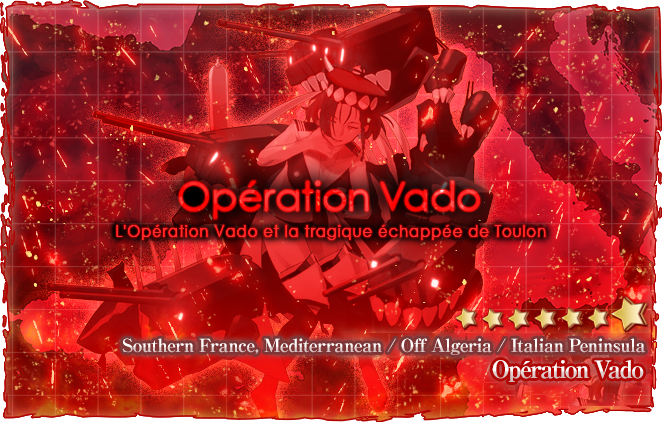
<style>
.page{position:relative;width:662px;height:422px}
.page>*{position:absolute;margin:0}
.t1{font:18px "RyuminPro-ExBold";letter-spacing:-0.04em}
.t2{font:24px "RyuminPro-ExBold";letter-spacing:-0.08em}
</style>
<div class="page">
<p class="t1" style="left:122px;top:338px;width:524px;height:17px">Southern France, Mediterranean / Off Algeria / Italian Peninsula</p>
<p class="t2" style="left:492px;top:360px;width:152px;height:22px">Opération Vado</p>
</div>
